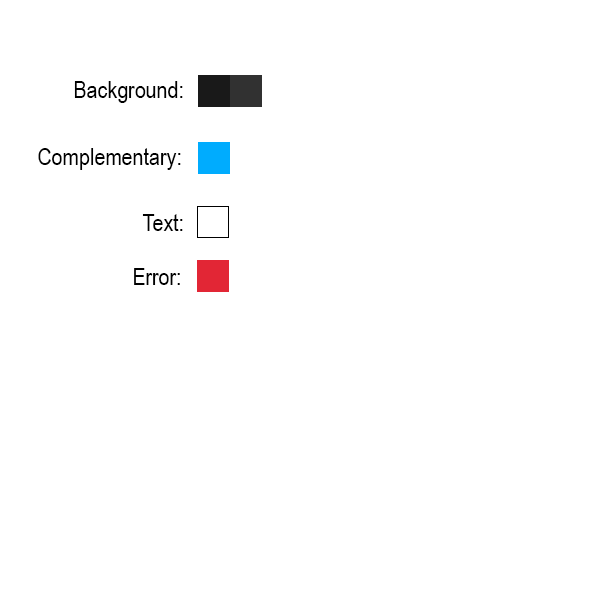
<style>
.page{position:relative;width:600px;height:600px;background:#ffffff}
.page>*{position:absolute;margin:0}
.t1{font:24px "ArialNarrow";color:#000000}
</style>
<div class="page">
<p class="t1" style="left:74px;top:81px;width:109px;height:22px">Background:</p>
<p class="t1" style="left:38px;top:148px;width:143px;height:22px">Complementary:</p>
<p class="t1" style="left:142px;top:214px;width:41px;height:17px">Text:</p>
<p class="t1" style="left:134px;top:268px;width:46px;height:17px">Error:</p>
</div>
